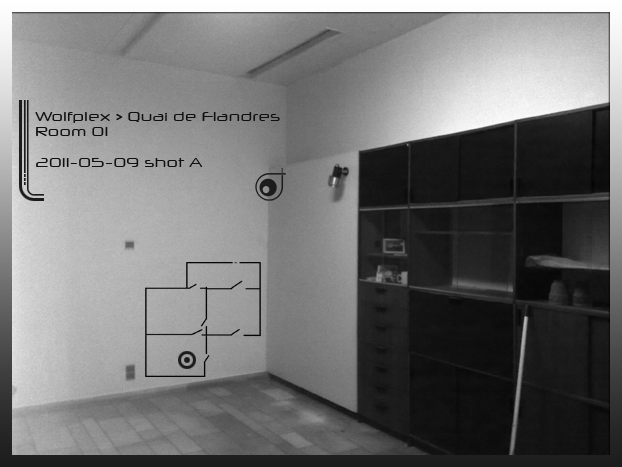
<style>
.page{position:relative;width:622px;height:467px}
.page>*{position:absolute;margin:0}
.t1{font:13px "NeuropolXFree";color:#101010}
</style>
<div class="page">
<p class="t1" style="left:35px;top:112px;width:245px;height:55px">Wolfplex &gt; Quai de Flandres<br>Room 01<br><br>2011-05-09 shot A</p>
</div>
